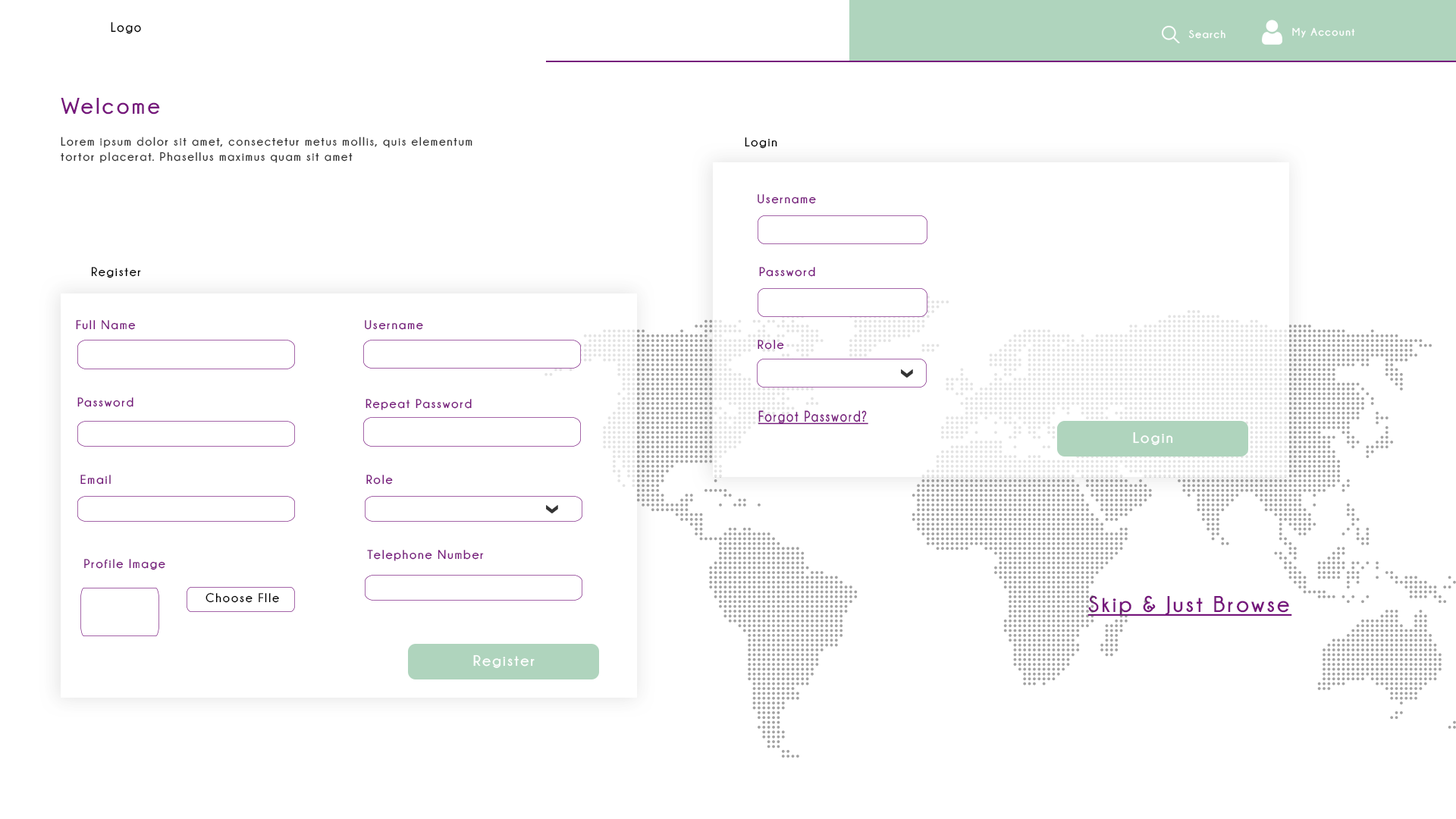
<style>
.page{position:relative;width:1456px;height:819px;background:#ffffff}
.page>*{position:absolute;margin:0}
.t1{font:13.6px "Champagne&Limousines-Bold";letter-spacing:0.1em;color:#000000;scale:0.94 1}
.t2{font:10.9px "Champagne&Limousines-Bold";letter-spacing:0.1em;color:#ffffff}
.t3{font:22.7px "Champagne&Limousines-Bold";letter-spacing:0.1em;color:#76167c}
.t4{font:12.1px/15.2px "Champagne&Limousines-Bold";letter-spacing:0.1em;color:#333333}
.t5{font:12.6px "Champagne&Limousines-Bold";letter-spacing:0.1em;color:#000000}
.t6{font:12.6px "Champagne&Limousines-Bold";letter-spacing:0.1em;color:#76167c}
.t7{font:15.6px "Champagne&Limousines-Bold";letter-spacing:0.1em;color:#76167c;text-decoration:underline;scale:0.81 1}
.t8{font:15.1px "Champagne&Limousines-Bold";letter-spacing:0.1em;color:#ffffff;scale:1.03 1}
.t9{font:22.7px "Champagne&Limousines-Bold";letter-spacing:0.1em;color:#76167c;text-decoration:underline}
</style>
<div class="page">
<p class="t1" style="left:111px;top:22px;width:30px;height:12px">Logo</p>
<p class="t2" style="left:1188px;top:30px;width:37px;height:9px">Search</p>
<p class="t2" style="left:1292px;top:27px;width:63px;height:11px">My Account</p>
<p class="t3" style="left:61px;top:98px;width:99px;height:17px">Welcome</p>
<p class="t4" style="left:61px;top:136px;width:411px;height:27px">Lorem ipsum dolor sit amet, consectetur metus mollis, quis elementum <br>tortor placerat. Phasellus maximus quam sit amet</p>
<p class="t5" style="left:745px;top:137px;width:32px;height:12px">Login</p>
<p class="t6" style="left:758px;top:194px;width:58px;height:10px">Username</p>
<p class="t5" style="left:91px;top:267px;width:50px;height:11px">Register</p>
<p class="t6" style="left:759px;top:267px;width:56px;height:10px">Password</p>
<p class="t6" style="left:76px;top:320px;width:60px;height:10px">Full Name</p>
<p class="t6" style="left:365px;top:320px;width:58px;height:10px">Username</p>
<p class="t6" style="left:758px;top:340px;width:26px;height:10px">Role</p>
<p class="t6" style="left:77px;top:397px;width:56px;height:10px">Password</p>
<p class="t6" style="left:366px;top:399px;width:106px;height:11px">Repeat Password</p>
<p class="t7" style="left:758px;top:410px;width:110px;height:15px">Forgot Password?</p>
<p class="t8" style="left:1133px;top:431px;width:40px;height:14px">Login</p>
<p class="t6" style="left:80px;top:475px;width:31px;height:10px">Email</p>
<p class="t6" style="left:366px;top:475px;width:27px;height:10px">Role</p>
<p class="t6" style="left:367px;top:550px;width:117px;height:11px">Telephone Number</p>
<p class="t6" style="left:84px;top:559px;width:81px;height:11px">Profile Image</p>
<p class="t5" style="left:206px;top:592px;width:73px;height:11px">Choose FIle</p>
<p class="t9" style="left:1087px;top:595px;width:205px;height:21px">Skip &amp; Just Browse</p>
<p class="t8" style="left:473px;top:654px;width:62px;height:14px">Register</p>
</div>
